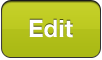
<style>
.page{position:relative;width:102px;height:60px}
.page>*{position:absolute;margin:0}
.t1{font:24px "HelveticaNeue-Bold";color:#ffffff}
</style>
<div class="page">
<p class="t1" style="left:29px;top:19px;width:44px;height:19px">Edit</p>
</div>
